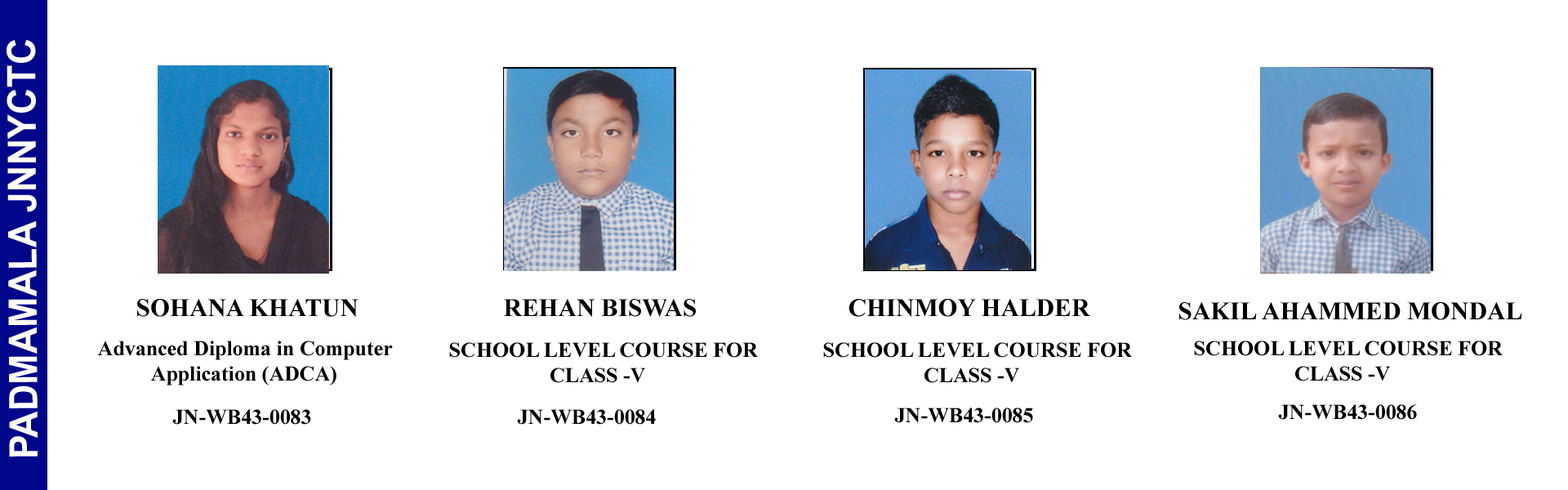
<style>
.page{position:relative;width:1568px;height:490px;background:#ffffff}
.page>*{position:absolute;margin:0}
.t1{font:39.2px "Arial-BoldMT";color:#ffffff;scale:0.94 1}
.t2{font:25.3px "TimesNewRomanPS-BoldMT";color:#000000}
.t3{font:21.2px "TimesNewRomanPS-BoldMT";color:#000000}
</style>
<div class="page">
<p class="t1" style="left:7px;top:39px;width:31px;height:418px;rotate:-90deg">PADMAMALA JNNYCTC</p>
<p class="t2" style="left:137px;top:299px;width:222px;height:18px">SOHANA KHATUN</p>
<p class="t2" style="left:504px;top:299px;width:192px;height:18px">REHAN BISWAS</p>
<p class="t2" style="left:849px;top:299px;width:241px;height:18px">CHINMOY HALDER</p>
<p class="t2" style="left:1179px;top:302px;width:343px;height:18px">SAKIL AHAMMED MONDAL</p>
<p class="t3" style="left:97px;top:341px;width:296px;height:44px">Advanced Diploma in Computer <br>          Application (ADCA)</p>
<p class="t3" style="left:1194px;top:341px;width:309px;height:40px">SCHOOL LEVEL COURSE FOR<br>                   CLASS -V</p>
<p class="t3" style="left:449px;top:342px;width:309px;height:41px">SCHOOL LEVEL COURSE FOR<br>                   CLASS -V</p>
<p class="t3" style="left:823px;top:342px;width:309px;height:41px">SCHOOL LEVEL COURSE FOR<br>                   CLASS -V</p>
<p class="t3" style="left:172px;top:409px;width:139px;height:16px">JN-WB43-0083</p>
<p class="t3" style="left:517px;top:409px;width:139px;height:16px">JN-WB43-0084</p>
<p class="t3" style="left:894px;top:408px;width:139px;height:15px">JN-WB43-0085</p>
<p class="t3" style="left:1278px;top:404px;width:139px;height:16px">JN-WB43-0086</p>
</div>
